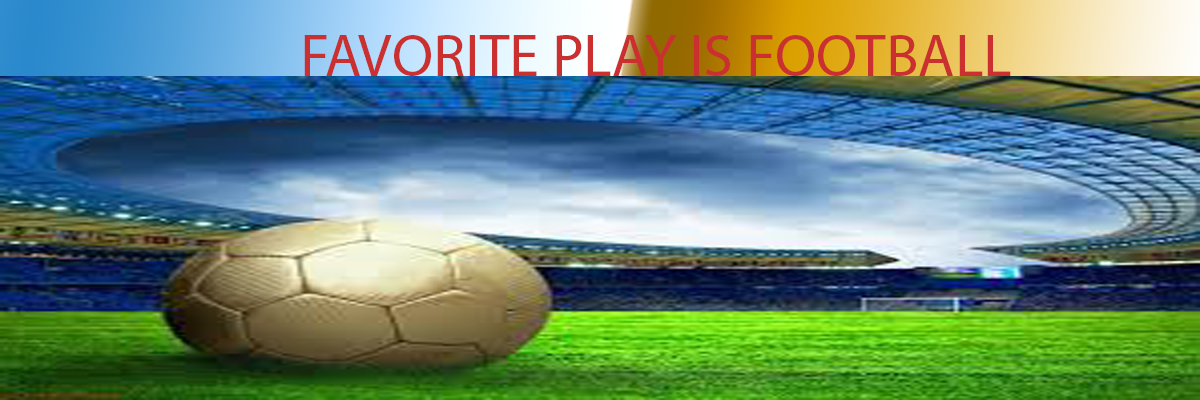
<style>
.page{position:relative;width:1200px;height:400px}
.page>*{position:absolute;margin:0}
.t1{font:60px "MyriadPro-Regular";color:#ca3030}
</style>
<div class="page">
<p class="t1" style="left:304px;top:35px;width:707px;height:41px">FAVORITE PLAY IS FOOTBALL</p>
</div>
